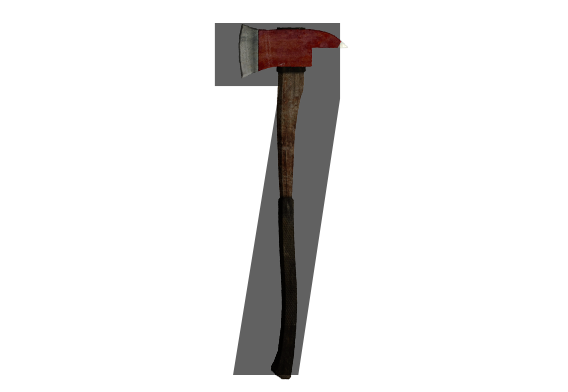
<style>
.page{position:relative;width:568px;height:392px;background:#ffffff}
.page>*{position:absolute;margin:0}
.t1{font:445.3px "Impact";scale:0.75 1}
</style>
<div class="page">
<p class="t1" style="left:214px;top:23px;width:127px;height:352px">7</p>
</div>
